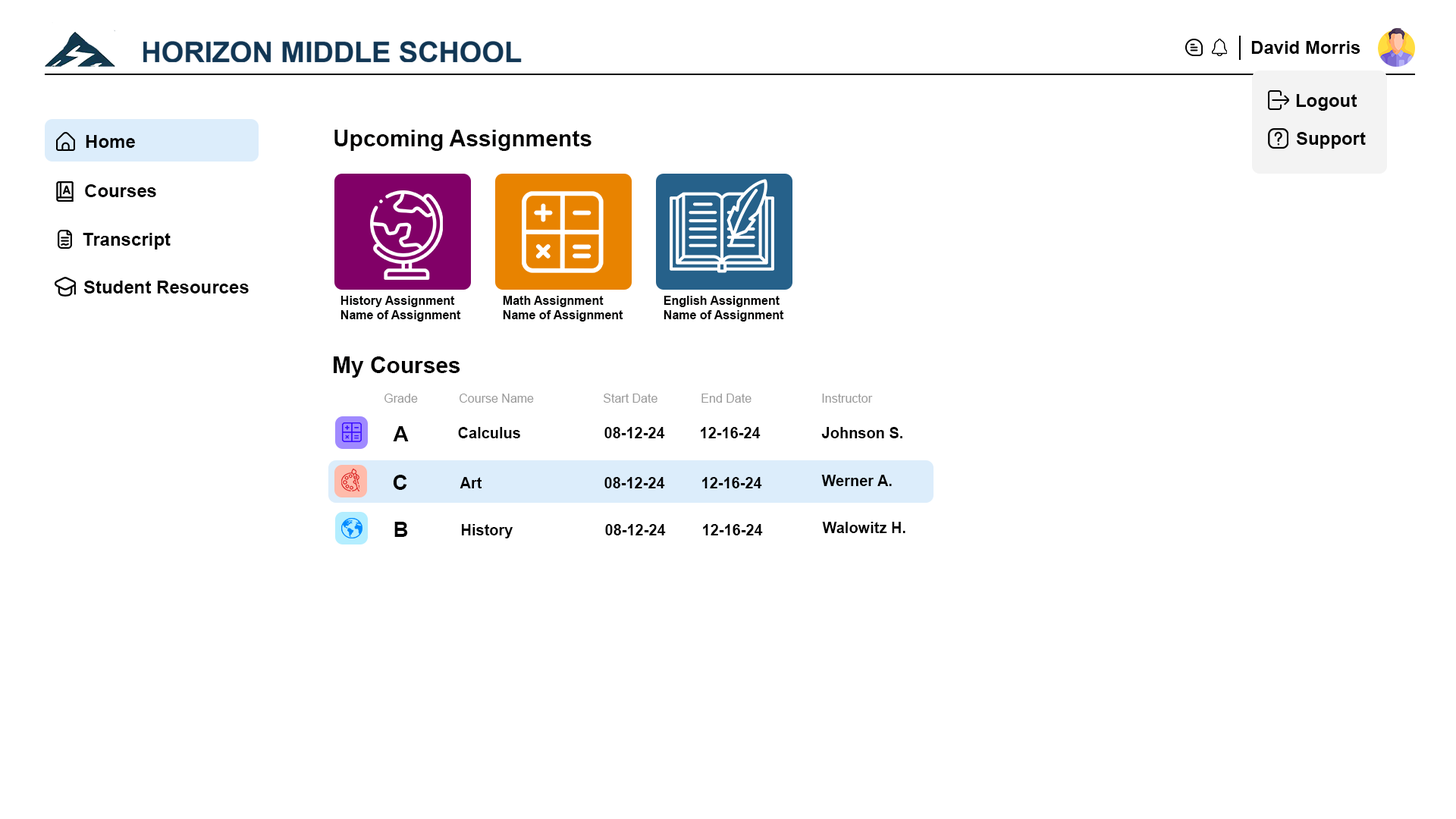
<style>
.page{position:relative;width:1456px;height:819px;background:#ffffff}
.page>*{position:absolute;margin:0}
.t1{font:18.2px "Arial-BoldMT";color:#000000}
.t2{font:22.7px "Arial-BoldMT";color:#010000}
.t3{font:18.2px "Arial-BoldMT";color:#010000}
.t4{font:12.1px "Arial-BoldMT";color:#010000}
.t5{font:12.1px "ArialMT";color:#9b9b9b}
.t6{font:21.2px "Arial-BoldMT";color:#000000}
.t7{font:15.2px "Arial-BoldMT";color:#000000}
</style>
<div class="page">
<p class="t1" style="left:1251px;top:41px;width:109px;height:13px">David Morris</p>
<p class="t1" style="left:1296px;top:94px;width:61px;height:17px">Logout</p>
<p class="t1" style="left:86px;top:135px;width:49px;height:13px">Home</p>
<p class="t2" style="left:334px;top:130px;width:257px;height:21px">Upcoming Assignments</p>
<p class="t1" style="left:1296px;top:132px;width:70px;height:17px">Support</p>
<p class="t3" style="left:85px;top:184px;width:71px;height:13px">Courses</p>
<p class="t1" style="left:83px;top:233px;width:88px;height:16px">Transcript</p>
<p class="t1" style="left:83px;top:281px;width:166px;height:12px">Student Resources</p>
<p class="t4" style="left:340px;top:296px;width:121px;height:26px">History Assignment<br>Name of Assignment</p>
<p class="t4" style="left:503px;top:296px;width:120px;height:26px">Math Assignment<br>Name of Assignment</p>
<p class="t4" style="left:664px;top:296px;width:120px;height:26px">English Assignment<br>Name of Assignment</p>
<p class="t2" style="left:334px;top:356px;width:126px;height:22px">My Courses</p>
<p class="t5" style="left:384px;top:394px;width:34px;height:9px">Grade</p>
<p class="t5" style="left:460px;top:394px;width:74px;height:9px">Course Name</p>
<p class="t5" style="left:604px;top:394px;width:53px;height:9px">Start Date</p>
<p class="t5" style="left:701px;top:394px;width:50px;height:9px">End Date</p>
<p class="t5" style="left:822px;top:394px;width:51px;height:9px">Instructor</p>
<p class="t6" style="left:393px;top:426px;width:16px;height:15px">A</p>
<p class="t7" style="left:458px;top:427px;width:62px;height:11px">Calculus</p>
<p class="t7" style="left:604px;top:427px;width:61px;height:11px">08-12-24</p>
<p class="t7" style="left:701px;top:427px;width:60px;height:11px">12-16-24</p>
<p class="t7" style="left:821px;top:427px;width:81px;height:11px">Johnson S.</p>
<p class="t6" style="left:393px;top:475px;width:14px;height:15px">C</p>
<p class="t7" style="left:460px;top:477px;width:22px;height:11px">Art</p>
<p class="t7" style="left:604px;top:477px;width:61px;height:11px">08-12-24</p>
<p class="t7" style="left:702px;top:477px;width:60px;height:11px">12-16-24</p>
<p class="t7" style="left:821px;top:475px;width:71px;height:11px">Werner A.</p>
<p class="t6" style="left:394px;top:522px;width:14px;height:15px">B</p>
<p class="t7" style="left:822px;top:522px;width:83px;height:11px">Walowitz H.</p>
<p class="t7" style="left:462px;top:524px;width:51px;height:14px">History</p>
<p class="t7" style="left:605px;top:524px;width:61px;height:11px">08-12-24</p>
<p class="t7" style="left:703px;top:524px;width:60px;height:11px">12-16-24</p>
</div>
